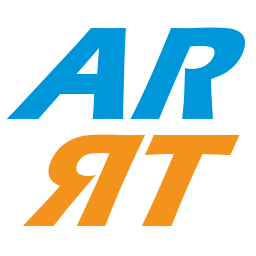
<style>
.page{position:relative;width:256px;height:256px;background:#ffffff}
.page>*{position:absolute;margin:0}
.t1{font:147.3px "ErasITC-Bold";color:#0097da;scale:0.93 1}
.t2{font:152.2px "ErasITC-Bold";color:#f3931b;scale:0.9 1}
</style>
<div class="page">
<p class="t1" style="left:6px;top:27px;width:240px;height:92px">AR</p>
<p class="t2" style="left:22px;top:134px;width:218px;height:92px;rotate:180deg">TR</p>
</div>
